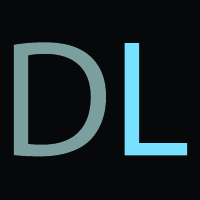
<style>
.page{position:relative;width:200px;height:200px;background:#070809}
.page>*{position:absolute;margin:0}
.t1{font:166.7px "MyriadPro-Regular";color:#7b9e9f}
.t2{font:166.7px "MyriadPro-Regular";color:#78e1ff}
</style>
<div class="page">
<p class="t1" style="left:13px;top:42px;width:175px;height:115px">D<span class="t2">L</span></p>
</div>
